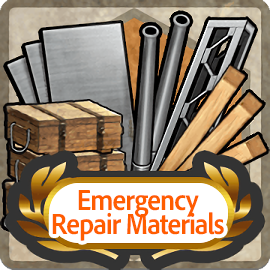
<style>
.page{position:relative;width:270px;height:270px}
.page>*{position:absolute;margin:0}
.t1{font:30px/24px "AdobeClean-Bold";letter-spacing:-0.04em;color:#ff5d00;scale:0.9 1}
</style>
<div class="page">
<p class="t1" style="left:52px;top:190px;width:172px;height:51px;text-align:center">Emergency<br>Repair Materials</p>
</div>
